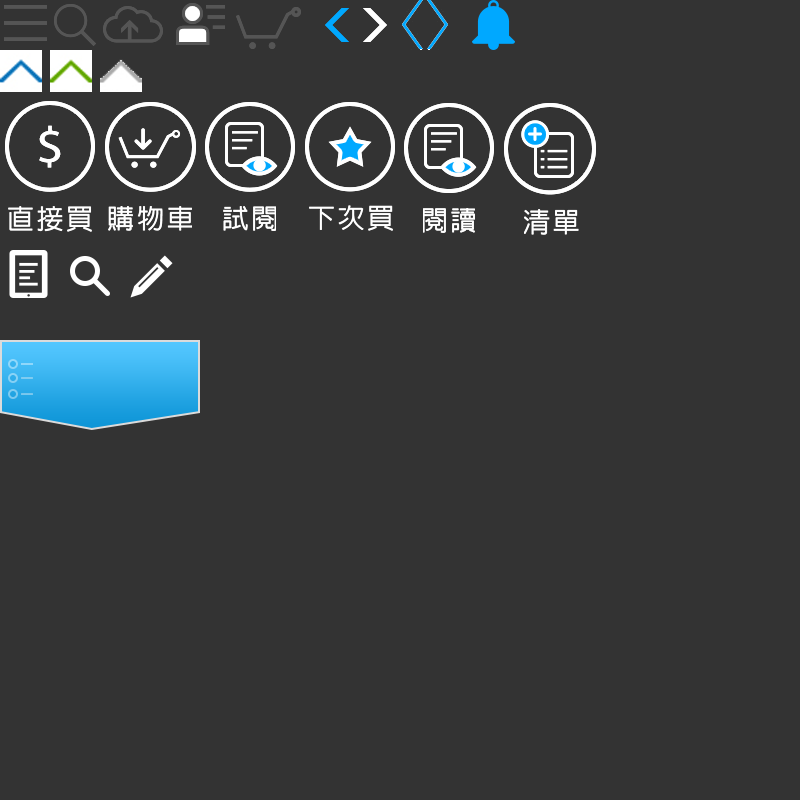
<style>
.page{position:relative;width:800px;height:800px;background:#333333}
.page>*{position:absolute;margin:0}
.t1{font:51px "MyriadPro-Regular";color:#ffffff;scale:1.1 1}
.t2{font:27.2px "LinGothic-Medium";letter-spacing:0.1em;color:#ffffff}
.t3{font:26.9px "LinGothic-Medium";letter-spacing:0.1em;color:#ffffff}
.t4{font:26.8px "LinGothic-Medium";letter-spacing:0.1em;color:#ffffff}
.t5{font:27px "LinGothic-Medium";letter-spacing:0.1em;color:#ffffff}
.t6{font:27.4px "LinGothic-Medium";letter-spacing:0.1em;color:#ffffff}
</style>
<div class="page">
<p class="t1" style="left:39px;top:125px;width:22px;height:43px">$</p>
<p class="t2" style="left:8px;top:206px;width:84px;height:26px">直接買</p>
<p class="t3" style="left:108px;top:206px;width:84px;height:25px">購物車</p>
<p class="t3" style="left:223px;top:206px;width:53px;height:25px">試閱</p>
<p class="t4" style="left:309px;top:205px;width:84px;height:26px">下次買</p>
<p class="t5" style="left:423px;top:208px;width:52px;height:25px">閱讀</p>
<p class="t6" style="left:524px;top:209px;width:55px;height:26px">清單</p>
</div>
